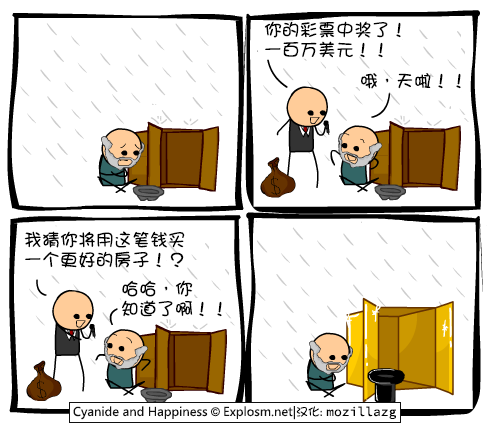
<style>
.page{position:relative;width:490px;height:440px;background:#ffffff}
.page>*{position:absolute;margin:0}
.t1{font:18px/20px "DFGirl";color:#000000}
.t2{font:18px "DFGirl";color:#000000}
</style>
<div class="page">
<p class="t1" style="left:264px;top:21px;width:137px;height:37px">你的彩票中奖了！<br>一百万美元！！</p>
<p class="t2" style="left:361px;top:73px;width:100px;height:16px">哦，天啦！！</p>
<p class="t1" style="left:24px;top:231px;width:161px;height:37px">我猜你将用这笔钱买<br>一个更好的房子！？</p>
<p class="t1" style="left:122px;top:280px;width:100px;height:37px">哈哈，你<br>知道了啊！！</p>
</div>
